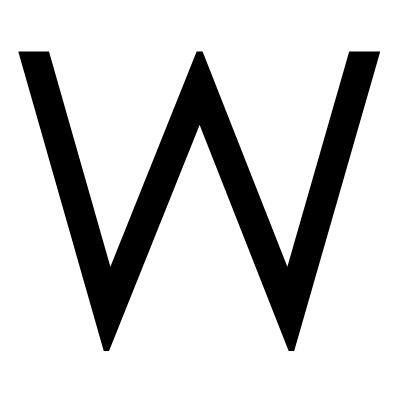
<style>
.page{position:relative;width:400px;height:400px;background:#ffffff}
.page>*{position:absolute;margin:0}
.t1{font:416.7px "CenturyGothic";color:#000000}
</style>
<div class="page">
<p class="t1" style="left:18px;top:51px;width:362px;height:300px">W</p>
</div>
